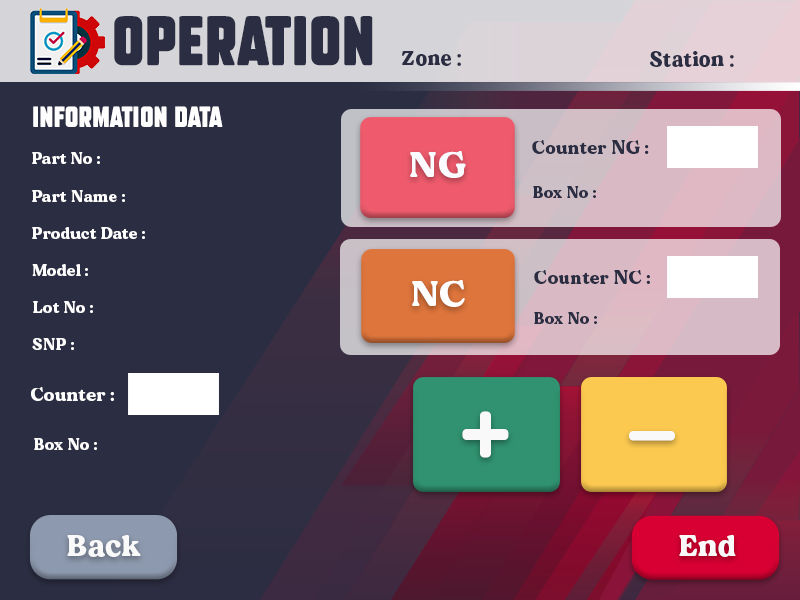
<style>
.page{position:relative;width:800px;height:600px;background:#2b2d42}
.page>*{position:absolute;margin:0}
.t1{font:48px "SubtleCurves";letter-spacing:0.025em;color:#2b2d42}
.t2{font:20px "MADEDillan";letter-spacing:0.025em;color:#2b2d42}
.t3{font:20px "SubtleCurves";letter-spacing:0.025em;color:#fefefe}
.t4{font:18px "MADEDillan";letter-spacing:0.025em;color:#2b2d42}
.t5{font:16px "MADEDillan";letter-spacing:0.025em;color:#fefefe}
.t6{font:36px "MADEDillan";letter-spacing:0.025em;color:#fbfbff}
.t7{font:16px "MADEDillan";letter-spacing:0.025em;color:#2b2d42}
.t8{font:36px "MADEDillan";letter-spacing:0.025em;color:#ffffff}
.t9{font:18px "MADEDillan";letter-spacing:0.025em;color:#fefefe}
.t10{font:110px "MADEDillan";letter-spacing:0.025em;color:#f9f9f9}
.t11{font:30px "MADEDillan";letter-spacing:0.025em;color:#f9f9f9}
</style>
<div class="page">
<p class="t1" style="left:114px;top:16px;width:259px;height:50px">operation</p>
<p class="t2" style="left:402px;top:51px;width:59px;height:15px">Zone :</p>
<p class="t2" style="left:650px;top:51px;width:84px;height:16px">Station :</p>
<p class="t3" style="left:33px;top:106px;width:190px;height:21px">Information Data</p>
<p class="t4" style="left:532px;top:140px;width:117px;height:14px">Counter NG :</p>
<p class="t5" style="left:32px;top:152px;width:68px;height:12px">Part No :</p>
<p class="t6" style="left:410px;top:151px;width:56px;height:27px">NG</p>
<p class="t5" style="left:32px;top:190px;width:93px;height:12px">Part Name :</p>
<p class="t7" style="left:533px;top:186px;width:63px;height:12px">Box No :</p>
<p class="t5" style="left:32px;top:227px;width:113px;height:12px">Product Date :</p>
<p class="t5" style="left:32px;top:264px;width:56px;height:12px">Model :</p>
<p class="t4" style="left:534px;top:270px;width:116px;height:14px">Counter NC :</p>
<p class="t8" style="left:412px;top:280px;width:53px;height:27px">NC</p>
<p class="t5" style="left:33px;top:301px;width:60px;height:12px">Lot No :</p>
<p class="t7" style="left:534px;top:312px;width:63px;height:12px">Box No :</p>
<p class="t5" style="left:32px;top:338px;width:42px;height:12px">SNP :</p>
<p class="t9" style="left:31px;top:387px;width:83px;height:14px">Counter :</p>
<p class="t10" style="left:462px;top:411px;width:47px;height:47px">+</p>
<p class="t5" style="left:34px;top:438px;width:63px;height:12px">Box No :</p>
<p class="t10" style="left:629px;top:431px;width:46px;height:10px">-</p>
<p class="t11" style="left:679px;top:534px;width:57px;height:23px">End</p>
<p class="t11" style="left:67px;top:535px;width:74px;height:22px">Back</p>
</div>
